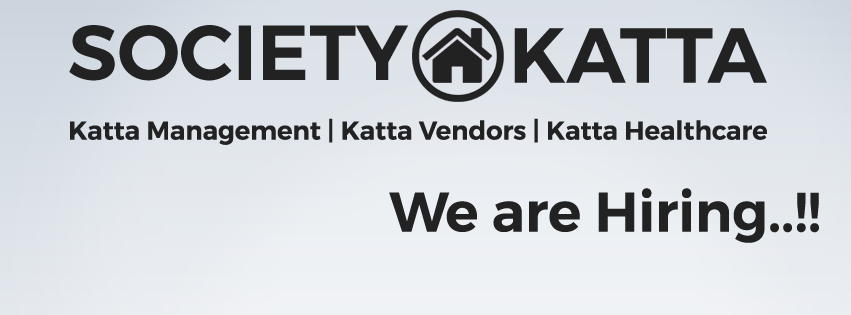
<style>
.page{position:relative;width:851px;height:315px}
.page>*{position:absolute;margin:0}
.t1{font:77.9px "Montserrat-SemiBold";color:#222222}
.t2{font:25.8px "Montserrat-SemiBold";color:#222222}
.t3{font:55.6px "Montserrat-SemiBold";color:#222222}
</style>
<div class="page">
<p class="t1" style="left:69px;top:25px;width:339px;height:56px">SOCIETY</p>
<p class="t1" style="left:514px;top:28px;width:253px;height:55px">KATTA</p>
<p class="t2" style="left:70px;top:118px;width:697px;height:27px">Katta Management | Katta Vendors | Katta Healthcare</p>
<p class="t3" style="left:389px;top:188px;width:430px;height:55px">We are Hiring..!!</p>
</div>
